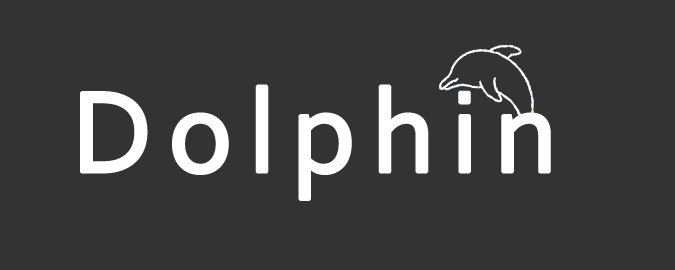
<style>
.page{position:relative;width:675px;height:270px;background:#333333}
.page>*{position:absolute;margin:0}
.t1{font:121px "Corbel";letter-spacing:0.1em;color:#ffffff;font-weight:bold}
</style>
<div class="page">
<p class="t1" style="left:80px;top:84px;width:471px;height:117px">Dolphin</p>
</div>
